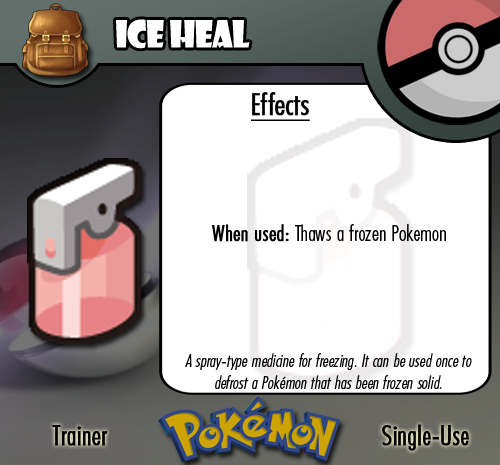
<style>
.page{position:relative;width:500px;height:465px;background:#ffffff}
.page>*{position:absolute;margin:0}
.t1{font:36.7px "ShowcardGothic-Reg";letter-spacing:-0.025em;color:#ffffff;scale:0.91 1}
.t2{font:22.2px "FuturaCondensedBQ-Light";color:#010101}
.t3{font:27.8px "FuturaCondensedBQ-Light";color:#010101;font-weight:bold}
.t4{font:30.6px "FuturaCondensedBQ-Light";color:#010101;font-weight:bold;text-decoration:underline}
.t5{font:22.2px "FuturaCondensedBQ-Light";color:#010101;font-weight:bold}
.t6{font:18.1px "FuturaCondensedBQ-Light";color:#010101;font-style:italic}
</style>
<div class="page">
<p class="t1" style="left:116px;top:19px;width:134px;height:30px">Ice Heal</p>
<p class="t2" style="left:212px;top:92px;width:234px;height:150px"><span class="t3">  </span><span class="t4">Effects<br><br><br><br></span><span class="t5">When used: </span>Thaws a frozen Pokemon</p>
<p class="t6" style="left:185px;top:353px;width:287px;height:36px;text-align:center">A spray-type medicine for freezing. It can be used once to defrost a Pokémon that has been frozen solid.</p>
<p class="t3" style="left:52px;top:425px;width:55px;height:21px">Trainer</p>
<p class="t3" style="left:382px;top:424px;width:87px;height:27px">Single-Use</p>
</div>
